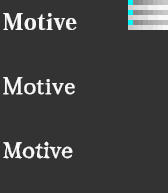
<style>
.page{position:relative;width:168px;height:193px;background:#333333}
.page>*{position:absolute;margin:0}
.t1{font:22px/64px "KozMinPro-Heavy";letter-spacing:0.022em;color:#f8f8f8}
.t2{font:22px/64px "AdobeFangsongStd-Regular";letter-spacing:0.028em;color:#f8f8f8;font-weight:bold}
.t3{font:22px/64px "ComicMysteryStd-DB";letter-spacing:-0.006em;color:#f8f8f8}
</style>
<div class="page">
<p class="t1" style="left:3px;top:13px;width:74px;height:146px">Motive<br><span class="t2">Motive<br></span><span class="t3">Motive</span></p>
</div>
